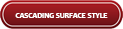
<style>
.page{position:relative;width:123px;height:29px}
.page>*{position:absolute;margin:0}
.t1{font:9.8px "Candara-Bold";color:#ffffff;font-variant:small-caps;scale:0.88 1}
</style>
<div class="page">
<p class="t1" style="left:15px;top:13px;width:93px;height:5px">cascading surface style</p>
</div>
